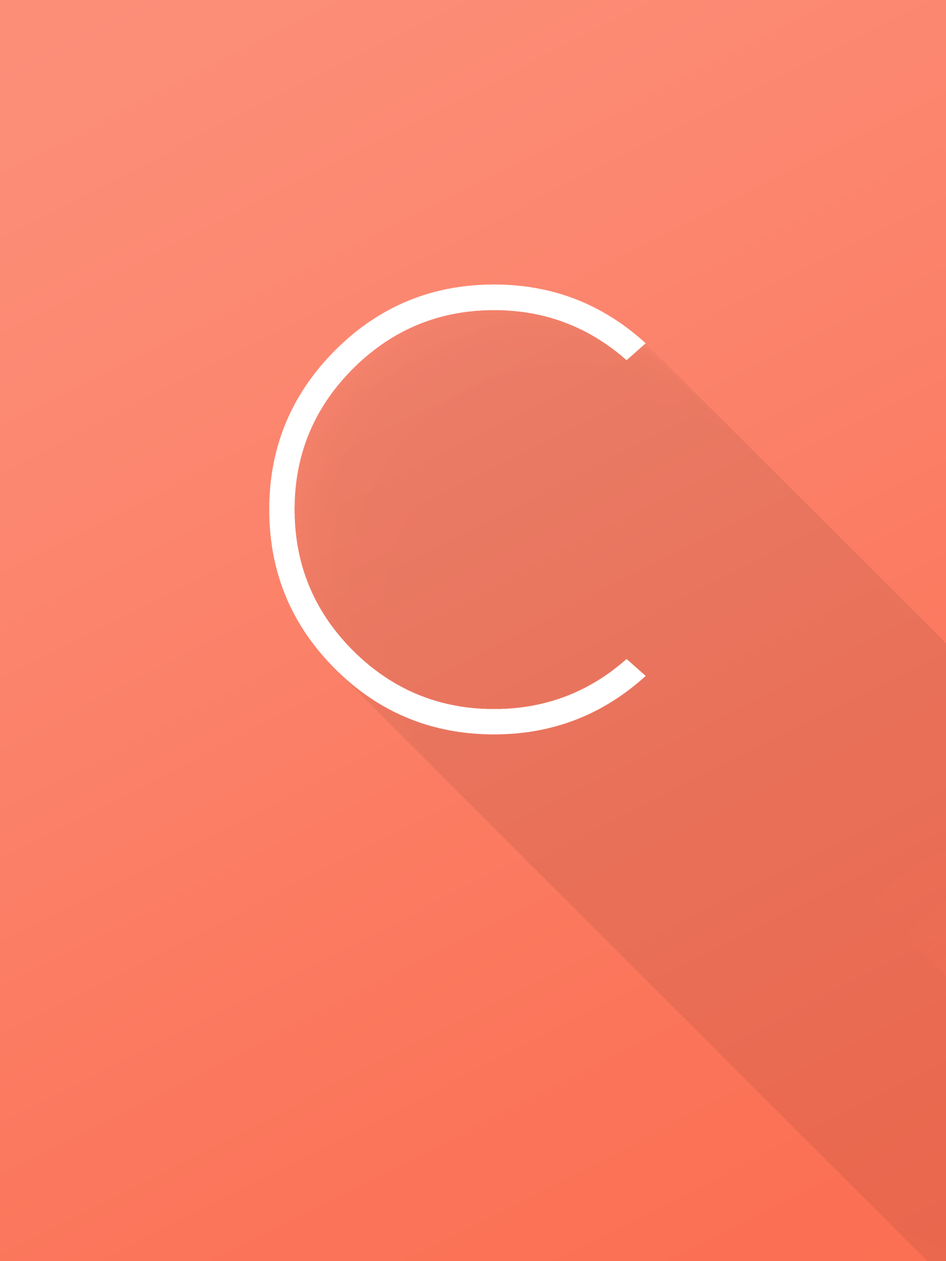
<style>
.page{position:relative;width:946px;height:1261px}
.page>*{position:absolute;margin:0}
.t1{font:636.1px "Champagne&Limousines";color:#ffffff}
</style>
<div class="page">
<p class="t1" style="left:269px;top:284px;width:377px;height:451px">C</p>
</div>
